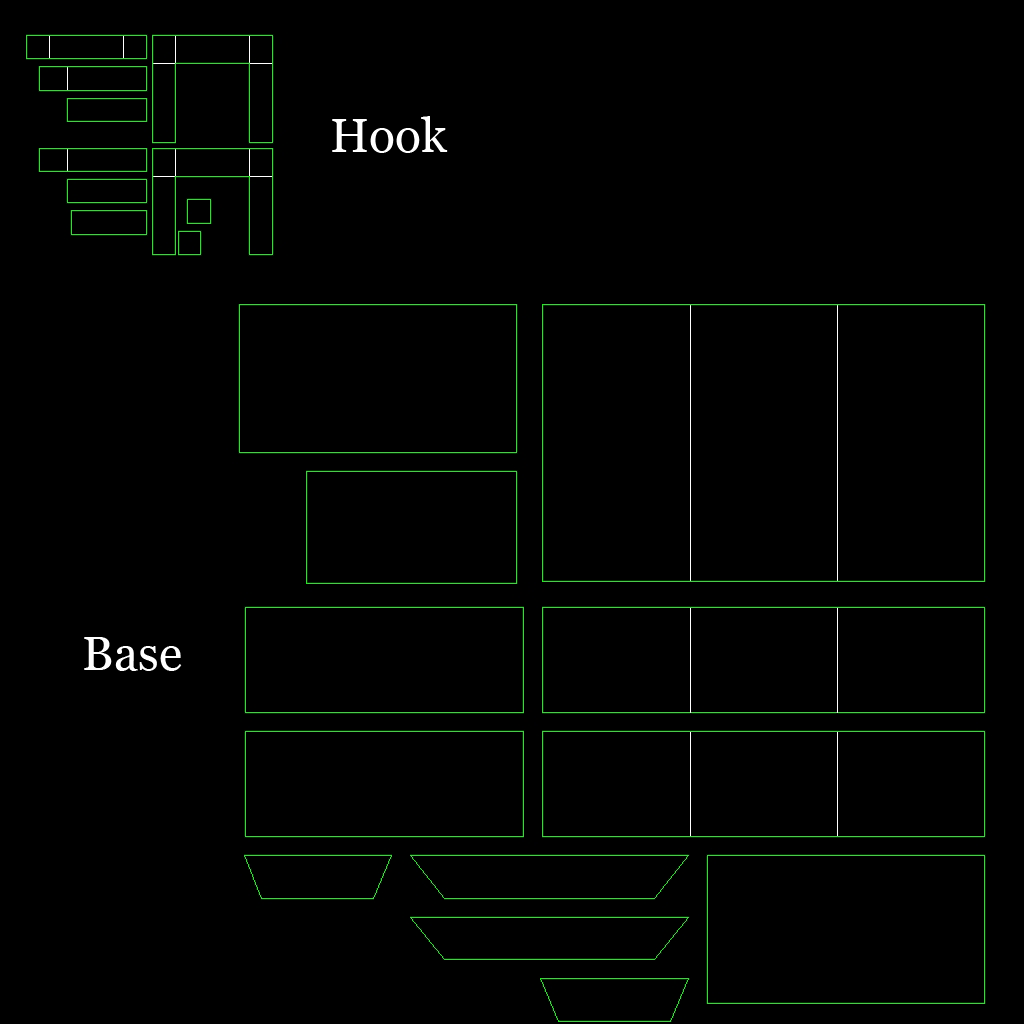
<style>
.page{position:relative;width:1024px;height:1024px;background:#000000}
.page>*{position:absolute;margin:0}
.t1{font:48px "Georgia";color:#ffffff}
</style>
<div class="page">
<p class="t1" style="left:332px;top:116px;width:116px;height:37px">Hook</p>
<p class="t1" style="left:84px;top:637px;width:98px;height:34px">Base</p>
</div>
